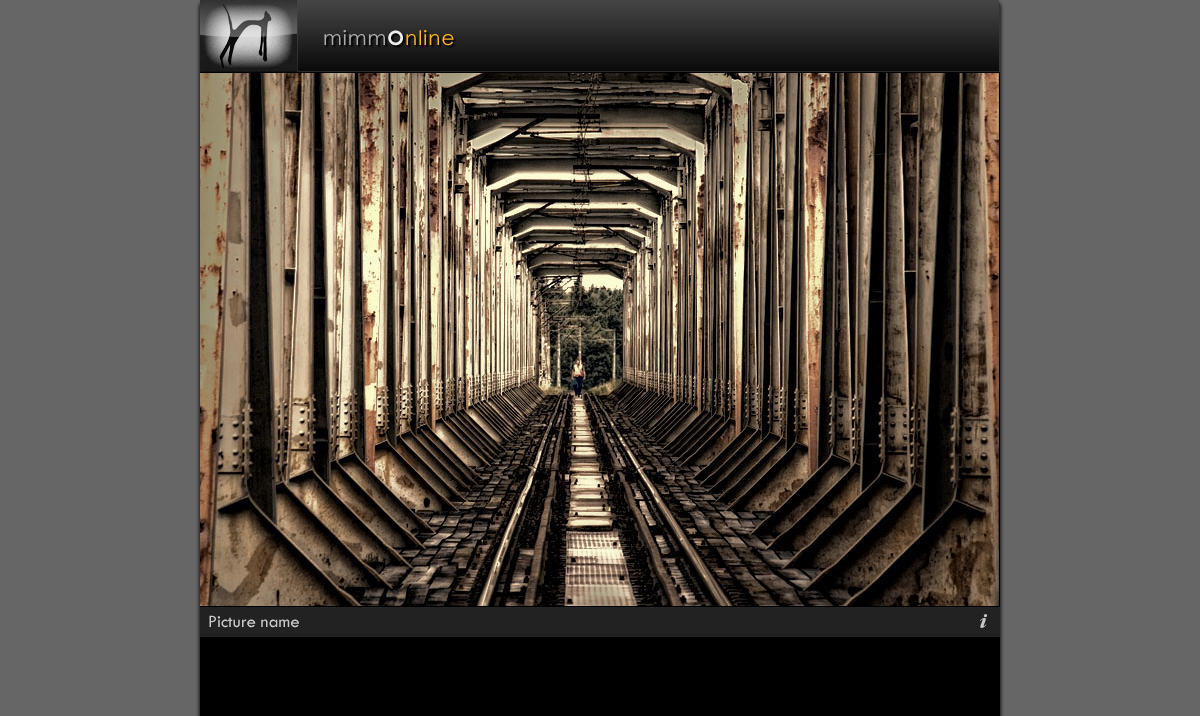
<style>
.page{position:relative;width:1200px;height:716px;background:#666666}
.page>*{position:absolute;margin:0}
.t1{font:20px "CenturyGothic";letter-spacing:0.05em;color:#ffb422}
.t2{font:20px "CenturyGothic";letter-spacing:0.05em;color:#aaaaaa}
.t3{font:20px "CenturyGothic-Bold";letter-spacing:0.05em;color:#eeeeee}
.t4{font:18px "TwCenMT-Regular";color:#c9c9c9}
</style>
<div class="page">
<p class="t1" style="left:324px;top:30px;width:130px;height:16px"><span class="t2">mimm</span><span class="t3">O</span>nline</p>
<p class="t4" style="left:209px;top:615px;width:90px;height:13px">Picture name</p>
</div>
